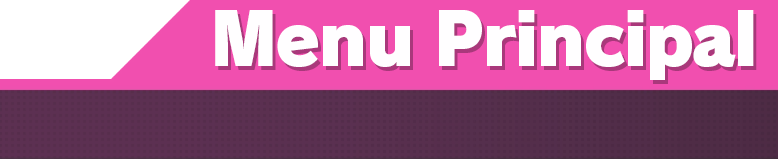
<style>
.page{position:relative;width:778px;height:160px;background:#f14faf}
.page>*{position:absolute;margin:0}
.t1{font:72px "RodinPro-UB";letter-spacing:-0.044em;color:#fffeff}
</style>
<div class="page">
<p class="t1" style="left:215px;top:10px;width:539px;height:70px">Menu Principal</p>
</div>
